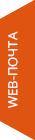
<style>
.page{position:relative;width:35px;height:140px;background:#df5410}
.page>*{position:absolute;margin:0}
.t1{font:12.4px "OpenSans";color:#ffffff;scale:1.05 1}
</style>
<div class="page">
<p class="t1" style="left:8px;top:31px;width:10px;height:77px;rotate:-90deg">WEB-ПОЧТА</p>
</div>
